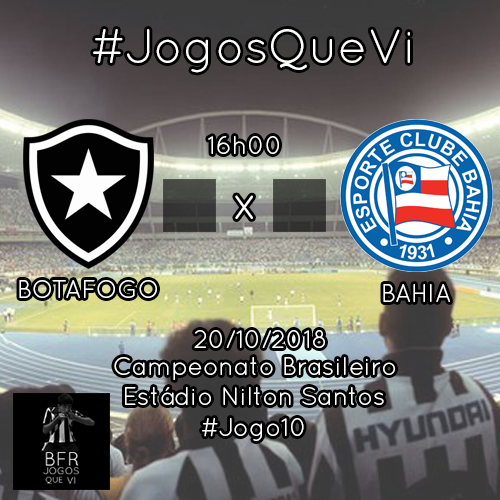
<style>
.page{position:relative;width:500px;height:500px}
.page>*{position:absolute;margin:0}
.t1{font:48px "QuicksandBook-Regular";color:#ffffff}
.t2{font:25px "QuicksandBook-Regular";color:#ffffff}
</style>
<div class="page">
<p class="t1" style="left:93px;top:29px;width:317px;height:44px">#JogosQueVi</p>
<p class="t2" style="left:208px;top:136px;width:71px;height:18px">16h00</p>
<p class="t1" style="left:235px;top:195px;width:18px;height:24px">x</p>
<p class="t2" style="left:19px;top:280px;width:138px;height:18px">BOTAFOGO</p>
<p class="t2" style="left:383px;top:284px;width:67px;height:18px">BAHIA</p>
<p class="t2" style="left:194px;top:330px;width:131px;height:18px">20/10/2018</p>
<p class="t2" style="left:114px;top:357px;width:281px;height:23px">Campeonato Brasileiro</p>
<p class="t2" style="left:125px;top:387px;width:259px;height:18px">Estádio Nilton Santos</p>
<p class="t2" style="left:202px;top:418px;width:102px;height:23px">#Jogo10</p>
</div>
